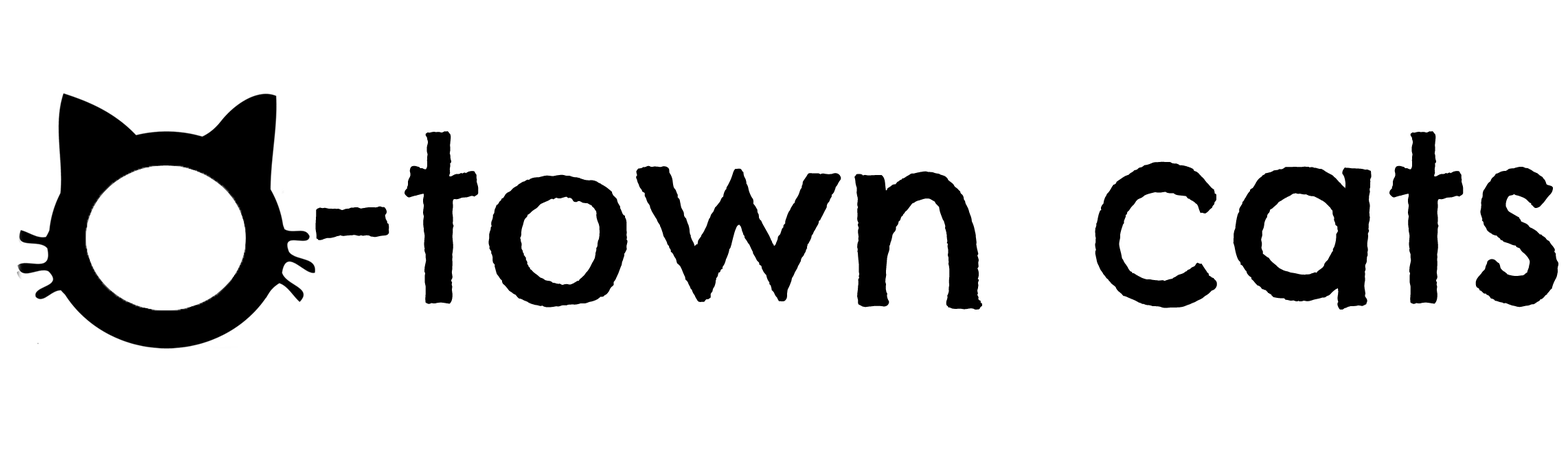
<style>
.page{position:relative;width:1568px;height:475px;background:#ffffff}
.page>*{position:absolute;margin:0}
.t1{font:233.5px "ChelseaMarket-Regular";color:#000000}
</style>
<div class="page">
<p class="t1" style="left:315px;top:131px;width:1243px;height:179px">-town cats</p>
</div>
